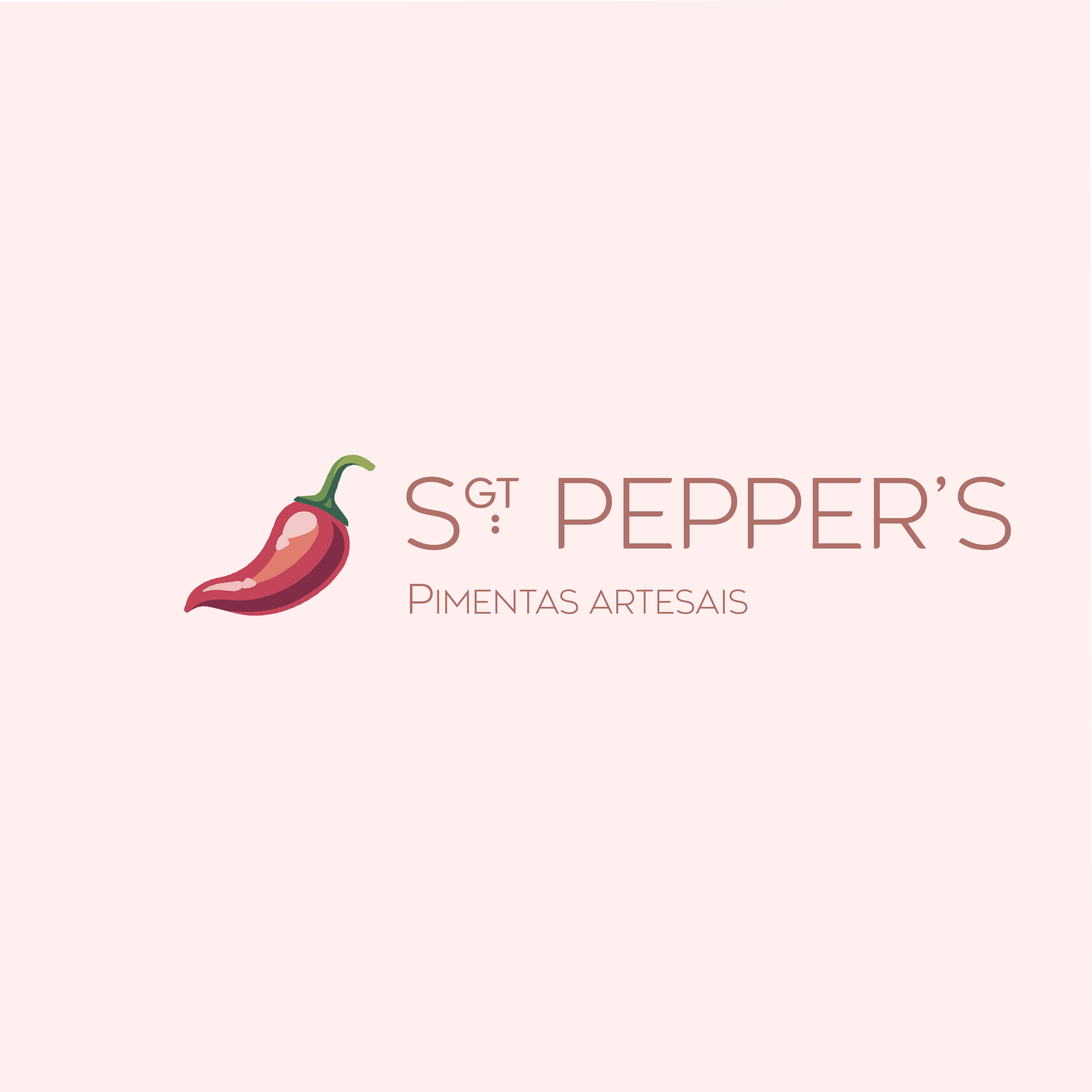
<style>
.page{position:relative;width:1092px;height:1092px;background:#ffefee}
.page>*{position:absolute;margin:0}
.t1{font:96.6px "Agenor-Thin";color:#af706a}
.t2{font:41.2px "Agenor-Light";color:#af706a}
.t3{font:41.5px "Agenor-Light";color:#af706a}
.t4{font:32.4px "Agenor-Thin";color:#af706a}
.t5{font:41.2px "Agenor-Thin";color:#af706a}
</style>
<div class="page">
<p class="t1" style="left:406px;top:476px;width:605px;height:74px">s   Pepper’s</p>
<p class="t2" style="left:465px;top:478px;width:54px;height:30px">gt</p>
<p class="t3" style="left:491px;top:515px;width:8px;height:7px">•</p>
<p class="t3" style="left:491px;top:526px;width:8px;height:8px">•</p>
<p class="t4" style="left:410px;top:584px;width:338px;height:30px"><span class="t5">p</span>imentas artesais</p>
</div>
